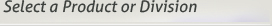
<style>
.page{position:relative;width:272px;height:26px}
.page>*{position:absolute;margin:0}
.t1{font:16.1px "Aller-Italic";color:#3d403e}
</style>
<div class="page">
<p class="t1" style="left:3px;top:0px;width:194px;height:13px">Select a Product or Division</p>
</div>
